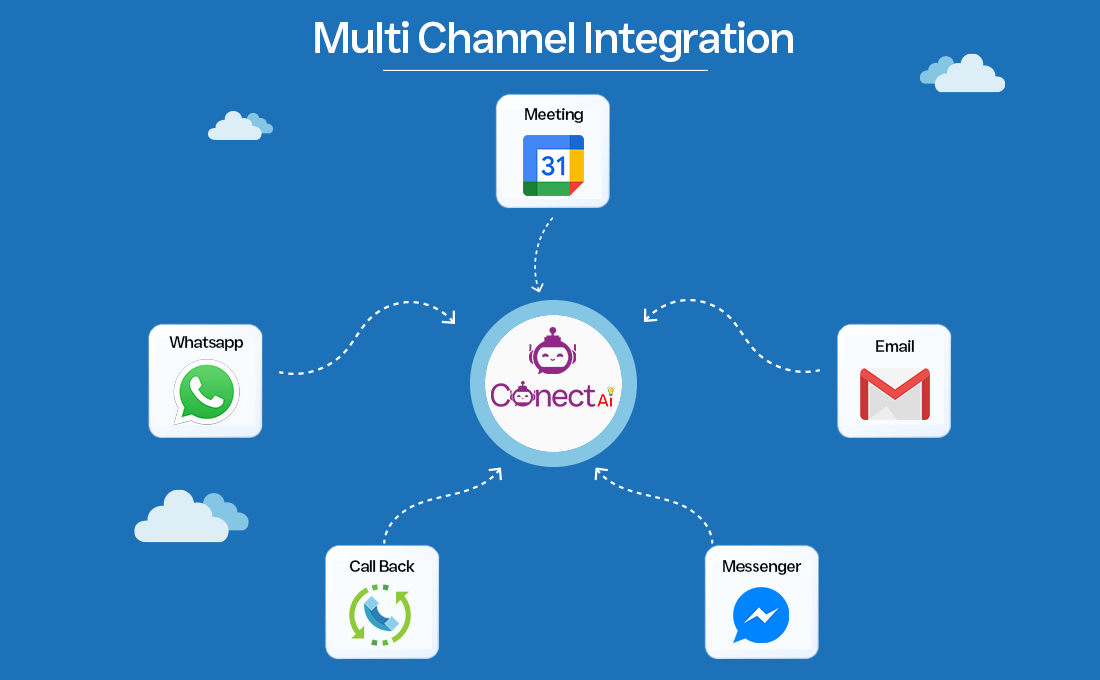
<style>
.page{position:relative;width:1100px;height:680px;background:#1d71b8}
.page>*{position:absolute;margin:0}
.t1{font:44px "JUSTSans-Md";letter-spacing:-0.045em;color:#fffefe}
.t2{font:16.5px "JUSTSans-Md";letter-spacing:-0.045em;color:#000000}
</style>
<div class="page">
<p class="t1" style="left:315px;top:21px;width:478px;height:41px">Multi Channel Integration</p>
<p class="t2" style="left:525px;top:108px;width:59px;height:15px">Meeting</p>
<p class="t2" style="left:169px;top:336px;width:75px;height:15px">Whatsapp</p>
<p class="t2" style="left:876px;top:340px;width:38px;height:12px">Email</p>
<p class="t2" style="left:349px;top:560px;width:66px;height:12px">Call Back</p>
<p class="t2" style="left:723px;top:560px;width:79px;height:15px">Messenger</p>
</div>
